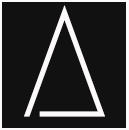
<style>
.page{position:relative;width:129px;height:130px;background:#121111}
.page>*{position:absolute;margin:0}
.t1{font:158.1px "Megrim";color:#fbf9f9}
</style>
<div class="page">
<p class="t1" style="left:24px;top:5px;width:81px;height:112px">A</p>
</div>
